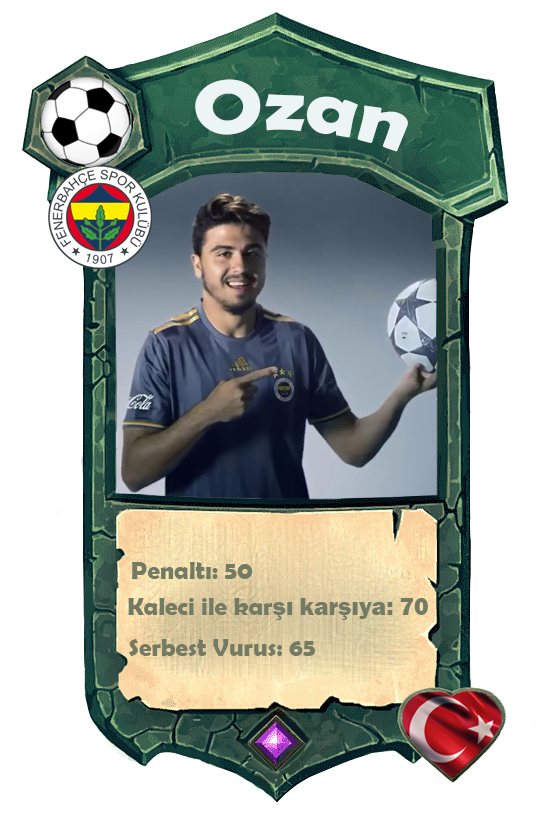
<style>
.page{position:relative;width:558px;height:814px;background:#ffffff}
.page>*{position:absolute;margin:0}
.t1{font:75.7px "BerlinSansFBDemi-Bold";color:#ecf4f4;scale:1.06 1}
.t2{font:25px "BerlinSansFBDemi-Bold";color:#747b65}
.t3{font:25px "FranklinGothic-Heavy";color:#747b65}
</style>
<div class="page">
<p class="t1" style="left:195px;top:79px;width:213px;height:73px;rotate:4deg">Ozan</p>
<p class="t2" style="left:132px;top:562px;width:121px;height:17px">Penaltı: 50</p>
<p class="t2" style="left:128px;top:598px;width:300px;height:22px">Kaleci ile kar<span class="t3">şı karşıya: 70</span></p>
<p class="t2" style="left:129px;top:639px;width:186px;height:17px">Serbest Vurus: 65</p>
</div>
